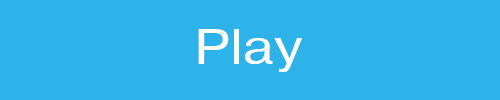
<style>
.page{position:relative;width:500px;height:100px;background:#2db2ea}
.page>*{position:absolute;margin:0}
.t1{font:48px "Helvetica";color:#ffffff;scale:1.2 1}
</style>
<div class="page">
<p class="t1" style="left:198px;top:29px;width:104px;height:43px">Play</p>
</div>
